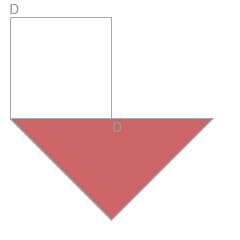
<style>
.page{position:relative;width:240px;height:240px;background:#ffffff}
.page>*{position:absolute;margin:0}
.t1{font:13.3px "ArialMT";color:#999999}
</style>
<div class="page">
<p class="t1" style="left:10px;top:4px;width:9px;height:10px">D</p>
<p class="t1" style="left:113px;top:122px;width:9px;height:10px">D</p>
</div>
